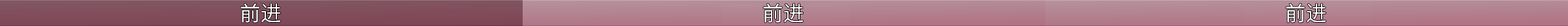
<style>
.page{position:relative;width:1568px;height:26px}
.page>*{position:absolute;margin:0}
.t1{font:20.6px "SourceHanSansSC-Normal";color:#ffffff}
</style>
<div class="page">
<p class="t1" style="left:240px;top:3px;width:41px;height:20px">前进</p>
<p class="t1" style="left:763px;top:3px;width:41px;height:20px">前进</p>
<p class="t1" style="left:1286px;top:3px;width:40px;height:20px">前进</p>
</div>
